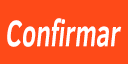
<style>
.page{position:relative;width:128px;height:64px;background:#fe4a18}
.page>*{position:absolute;margin:0}
.t1{font:37.8px "FogSansIt";color:#ffffff;scale:0.65 1}
</style>
<div class="page">
<p class="t1" style="left:7px;top:18px;width:115px;height:29px">Confirmar</p>
</div>
